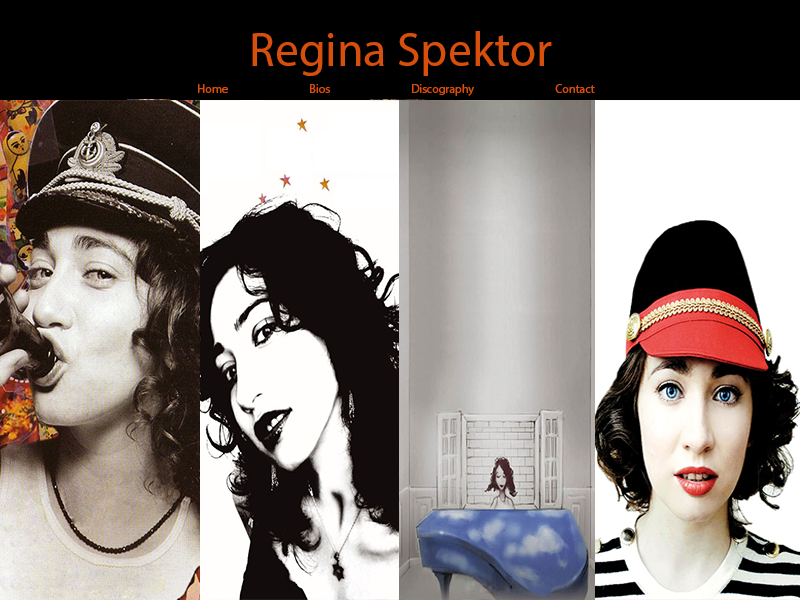
<style>
.page{position:relative;width:800px;height:600px}
.page>*{position:absolute;margin:0}
.t1{font:48px "MyriadPro-Regular";color:#d74f0c}
.t2{font:12px "MyriadPro-Regular";color:#d74f0c}
</style>
<div class="page">
<p class="t1" style="left:252px;top:31px;width:300px;height:45px">Regina Spektor</p>
<p class="t2" style="left:198px;top:84px;width:397px;height:12px">Home                                Bios                                Discography                                Contact</p>
</div>
